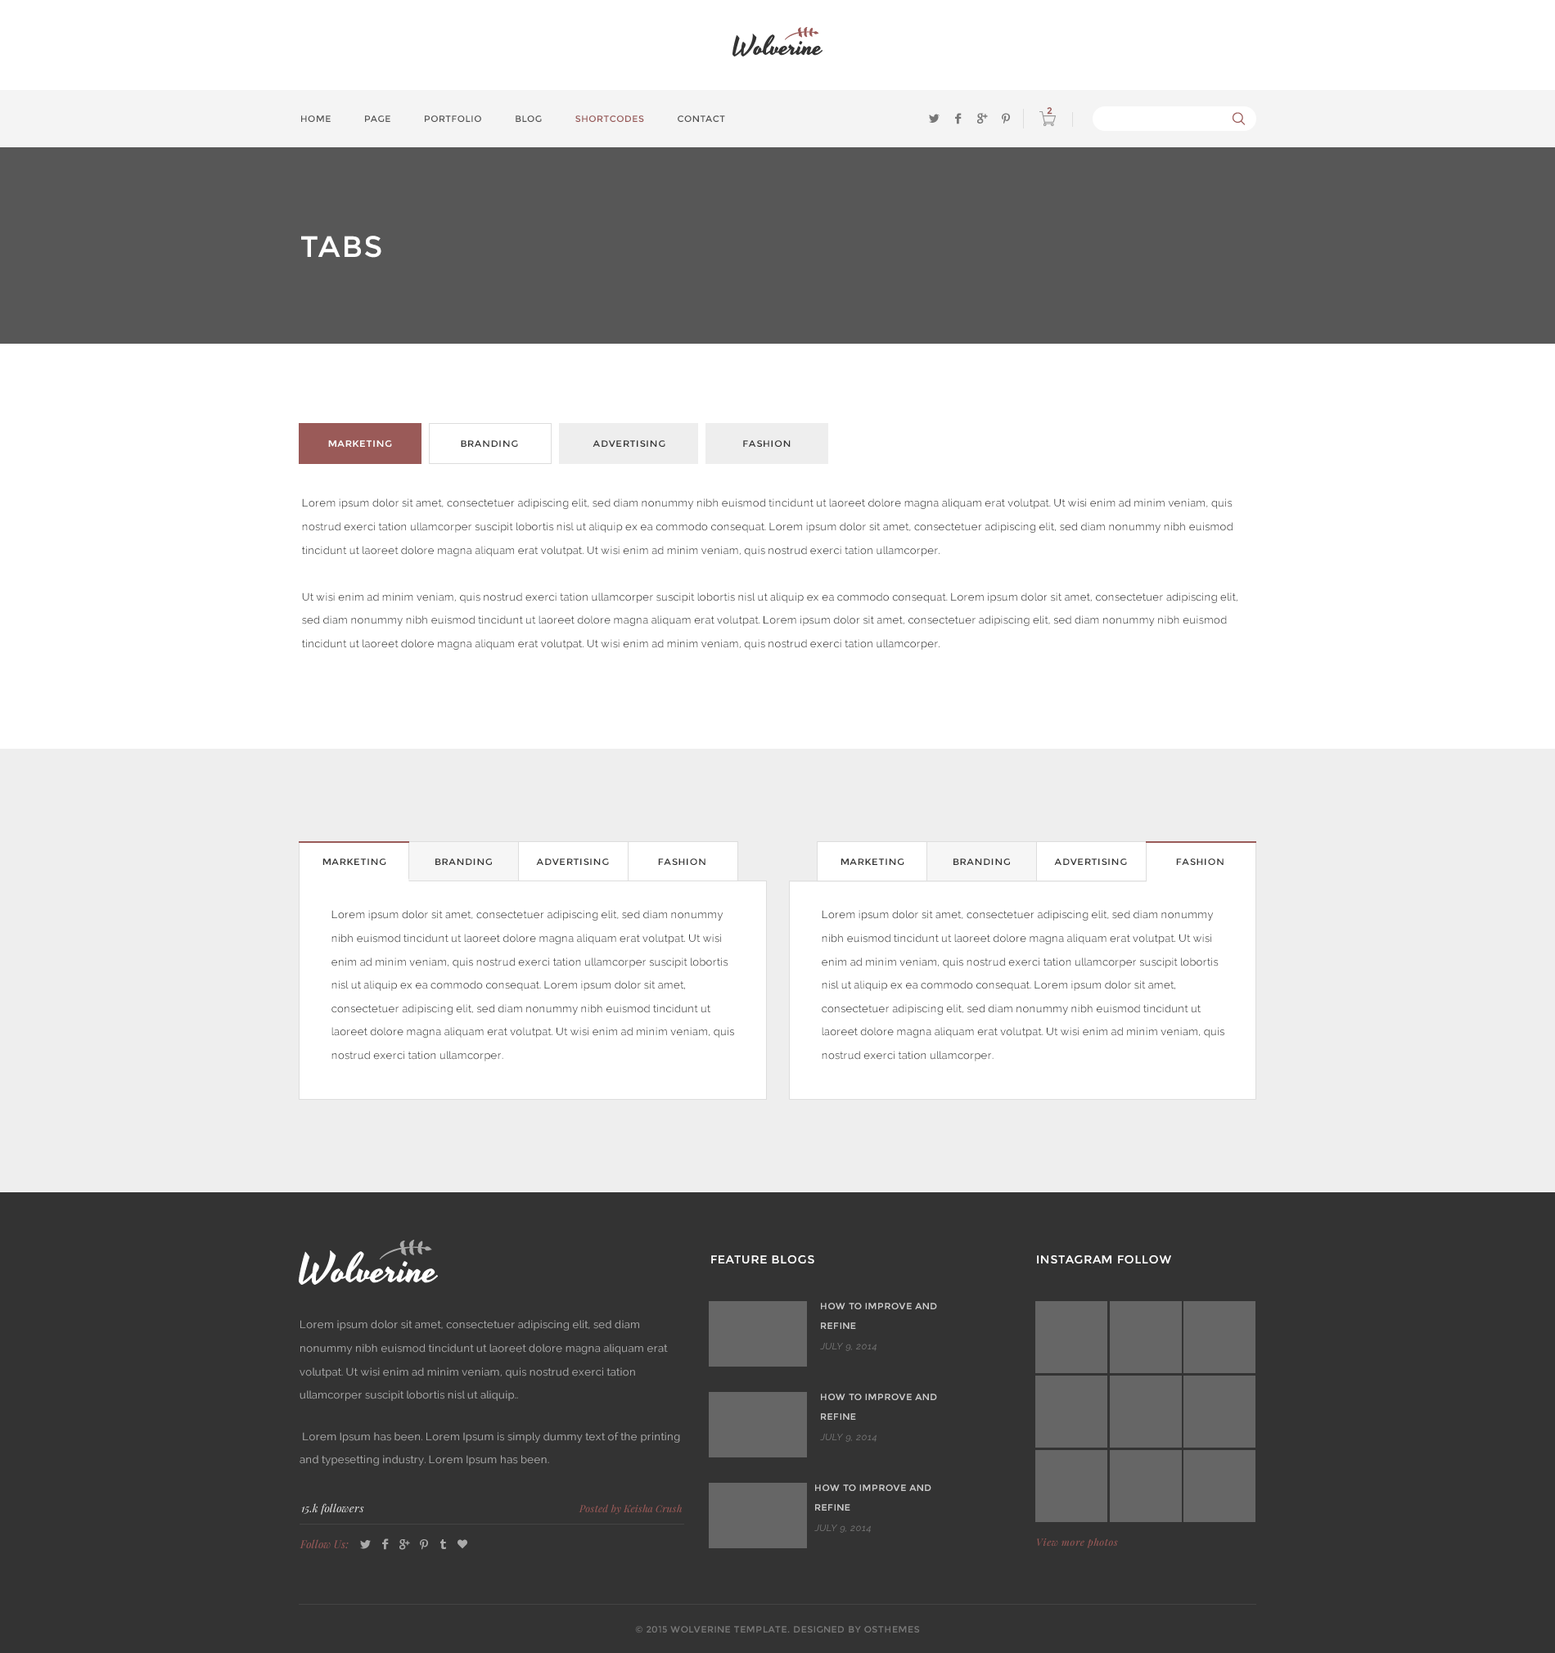
<style>
.page{position:relative;width:1555px;height:1653px;background:#ffffff}
.page>*{position:absolute;margin:0}
.t1{font:9px "Montserrat-Regular";color:#9a5a58;font-weight:bold}
.t2{font:9px "Montserrat-Regular";letter-spacing:0.05em;color:#535353}
.t3{font:9px "Montserrat-Regular";letter-spacing:0.05em;color:#995958}
.t4{font:29.5px "Montserrat-Regular";letter-spacing:0.05em;color:#ffffff}
.t5{font:9px "Montserrat-Regular";letter-spacing:0.05em;color:#ffffff;scale:1.05 1}
.t6{font:9px "Montserrat-Regular";letter-spacing:0.05em;color:#333333;scale:1.05 1}
.t7{font:10.6px/23.4px "Raleway-Regular";letter-spacing:0.02em;color:#333333}
.t8{font:11.5px "Montserrat-Regular";letter-spacing:0.05em;color:#ffffff}
.t9{font:9px/19.8px "Montserrat-Regular";letter-spacing:0.05em;color:#cccccc}
.t10{font:9px/19.8px "Raleway-Regular";letter-spacing:0.05em;color:#777777;font-style:italic}
.t11{font:10.6px/23.4px "Raleway-Regular";letter-spacing:0.02em;color:#aaaaaa}
.t12{font:10.6px "PlayfairDisplay-Italic";letter-spacing:0.02em;color:#dddddd}
.t13{font:9.8px "PlayfairDisplay-Italic";letter-spacing:0.02em;color:#9a5a58}
.t14{font:10.6px "PlayfairDisplay-Italic";letter-spacing:0.02em;color:#995958}
.t15{font:9.8px "PlayfairDisplay-Italic";letter-spacing:0.05em;color:#9a5a58}
.t16{font:9px "Montserrat-Regular";letter-spacing:0.05em;color:#777777}
</style>
<div class="page">
<p class="t1" style="left:1046px;top:107px;width:6px;height:8px">2</p>
<p class="t2" style="left:301px;top:115px;width:424px;height:7px">HOME      PAGE      PORTFOLIO      BLOG      <span class="t3">SHORTCODES</span>      CONTACT</p>
<p class="t4" style="left:301px;top:236px;width:80px;height:22px">TABS</p>
<p class="t5" style="left:328px;top:440px;width:64px;height:7px">MARKETING</p>
<p class="t6" style="left:461px;top:440px;width:57px;height:7px">BRANDING</p>
<p class="t6" style="left:592px;top:440px;width:73px;height:7px">ADVERTISING</p>
<p class="t6" style="left:743px;top:440px;width:47px;height:7px">FASHION</p>
<p class="t7" style="left:302px;top:498px;width:935px;height:152px">Lorem ipsum dolor sit amet, consectetuer adipiscing elit, sed diam nonummy nibh euismod tincidunt ut laoreet dolore magna aliquam erat volutpat. Ut wisi enim ad minim veniam, quis nostrud exerci tation ullamcorper suscipit lobortis nisl ut aliquip ex ea commodo consequat. Lorem ipsum dolor sit amet, consectetuer adipiscing elit, sed diam nonummy nibh euismod tincidunt ut laoreet dolore magna aliquam erat volutpat. Ut wisi enim ad minim veniam, quis nostrud exerci tation ullamcorper.<br> <br>Ut wisi enim ad minim veniam, quis nostrud exerci tation ullamcorper suscipit lobortis nisl ut aliquip ex ea commodo consequat. Lorem ipsum dolor sit amet, consectetuer adipiscing elit, sed diam nonummy nibh euismod tincidunt ut laoreet dolore magna aliquam erat volutpat. Lorem ipsum dolor sit amet, consectetuer adipiscing elit, sed diam nonummy nibh euismod tincidunt ut laoreet dolore magna aliquam erat volutpat. Ut wisi enim ad minim veniam, quis nostrud exerci tation ullamcorper.</p>
<p class="t6" style="left:322px;top:858px;width:64px;height:7px">MARKETING</p>
<p class="t6" style="left:435px;top:858px;width:57px;height:7px">BRANDING</p>
<p class="t6" style="left:536px;top:858px;width:73px;height:7px">ADVERTISING</p>
<p class="t6" style="left:658px;top:858px;width:47px;height:7px">FASHION</p>
<p class="t6" style="left:840px;top:858px;width:64px;height:7px">MARKETING</p>
<p class="t6" style="left:953px;top:858px;width:57px;height:7px">BRANDING</p>
<p class="t6" style="left:1054px;top:858px;width:73px;height:7px">ADVERTISING</p>
<p class="t6" style="left:1176px;top:858px;width:47px;height:7px">FASHION</p>
<p class="t7" style="left:331px;top:910px;width:403px;height:151px">Lorem ipsum dolor sit amet, consectetuer adipiscing elit, sed diam nonummy nibh euismod tincidunt ut laoreet dolore magna aliquam erat volutpat. Ut wisi enim ad minim veniam, quis nostrud exerci tation ullamcorper suscipit lobortis nisl ut aliquip ex ea commodo consequat. Lorem ipsum dolor sit amet, consectetuer adipiscing elit, sed diam nonummy nibh euismod tincidunt ut laoreet dolore magna aliquam erat volutpat. Ut wisi enim ad minim veniam, quis nostrud exerci tation ullamcorper.</p>
<p class="t7" style="left:821px;top:910px;width:403px;height:151px">Lorem ipsum dolor sit amet, consectetuer adipiscing elit, sed diam nonummy nibh euismod tincidunt ut laoreet dolore magna aliquam erat volutpat. Ut wisi enim ad minim veniam, quis nostrud exerci tation ullamcorper suscipit lobortis nisl ut aliquip ex ea commodo consequat. Lorem ipsum dolor sit amet, consectetuer adipiscing elit, sed diam nonummy nibh euismod tincidunt ut laoreet dolore magna aliquam erat volutpat. Ut wisi enim ad minim veniam, quis nostrud exerci tation ullamcorper.</p>
<p class="t8" style="left:711px;top:1255px;width:103px;height:8px">FEATURE BLOGS</p>
<p class="t8" style="left:1037px;top:1255px;width:134px;height:8px">INSTAGRAM FOLLOW</p>
<p class="t9" style="left:820px;top:1303px;width:117px;height:48px">HOW TO IMPROVE AND REFINE <br><span class="t10">JULY 9, 2014</span></p>
<p class="t11" style="left:299px;top:1320px;width:381px;height:145px">Lorem ipsum dolor sit amet, consectetuer adipiscing elit, sed diam nonummy nibh euismod tincidunt ut laoreet dolore magna aliquam erat volutpat. Ut wisi enim ad minim veniam, quis nostrud exerci tation ullamcorper suscipit lobortis nisl ut aliquip..<br> <br> Lorem Ipsum has been. Lorem Ipsum is simply dummy text of the printing and typesetting industry. Lorem Ipsum has been.</p>
<p class="t9" style="left:820px;top:1393px;width:117px;height:49px">HOW TO IMPROVE AND REFINE <br><span class="t10">JULY 9, 2014</span></p>
<p class="t9" style="left:814px;top:1484px;width:117px;height:48px">HOW TO IMPROVE AND REFINE <br><span class="t10">JULY 9, 2014</span></p>
<p class="t12" style="left:301px;top:1503px;width:63px;height:11px">15.k followers</p>
<p class="t13" style="left:578px;top:1504px;width:104px;height:10px">Posted by Keisha Crush</p>
<p class="t14" style="left:299px;top:1539px;width:50px;height:10px">Follow Us:</p>
<p class="t15" style="left:1037px;top:1537px;width:81px;height:11px">View more photos</p>
<p class="t16" style="left:635px;top:1626px;width:285px;height:7px">© 2015 WOLVERINE TEMPLATE. DESIGNED BY OSTHEMES</p>
</div>
